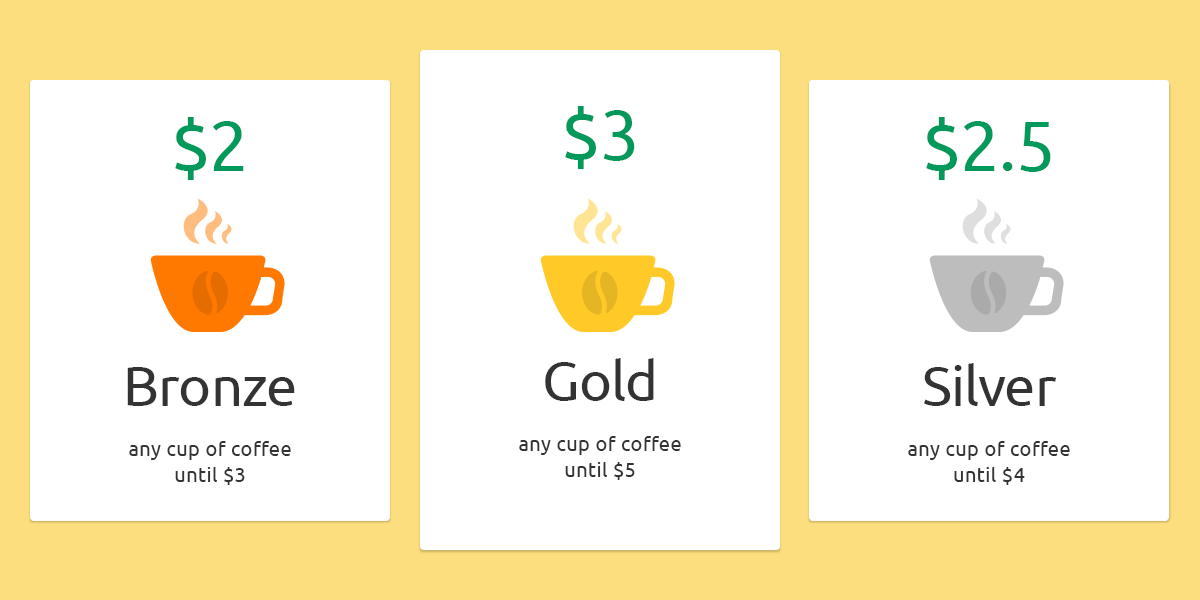
<style>
.page{position:relative;width:1200px;height:600px;background:#ffffff}
.page>*{position:absolute;margin:0}
.t1{font:70px "Ubuntu-Regular";letter-spacing:0.025em;color:#02995b}
.t2{font:70px "Ubuntu-Regular";color:#02995b}
.t3{font:20px/26px "Ubuntu-Regular";letter-spacing:0.025em;color:#333333}
.t4{font:56px/24px "Ubuntu-Regular";color:#333333}
</style>
<div class="page">
<p class="t1" style="left:565px;top:106px;width:70px;height:63px">$<span class="t2">3</span></p>
<p class="t1" style="left:175px;top:117px;width:69px;height:63px">$2</p>
<p class="t2" style="left:926px;top:117px;width:125px;height:63px"><span class="t1">$</span>2.5</p>
<p class="t3" style="left:519px;top:358px;width:162px;height:122px;text-align:center"><span class="t4">Gold<br><br></span>any cup of coffee<br>until $5</p>
<p class="t3" style="left:908px;top:363px;width:162px;height:122px;text-align:center"><span class="t4">Silver<br><br></span>any cup of coffee<br>until $4</p>
<p class="t3" style="left:127px;top:367px;width:168px;height:118px;text-align:center"><span class="t4">Bronze<br><br></span>any cup of coffee<br>until $3</p>
</div>
